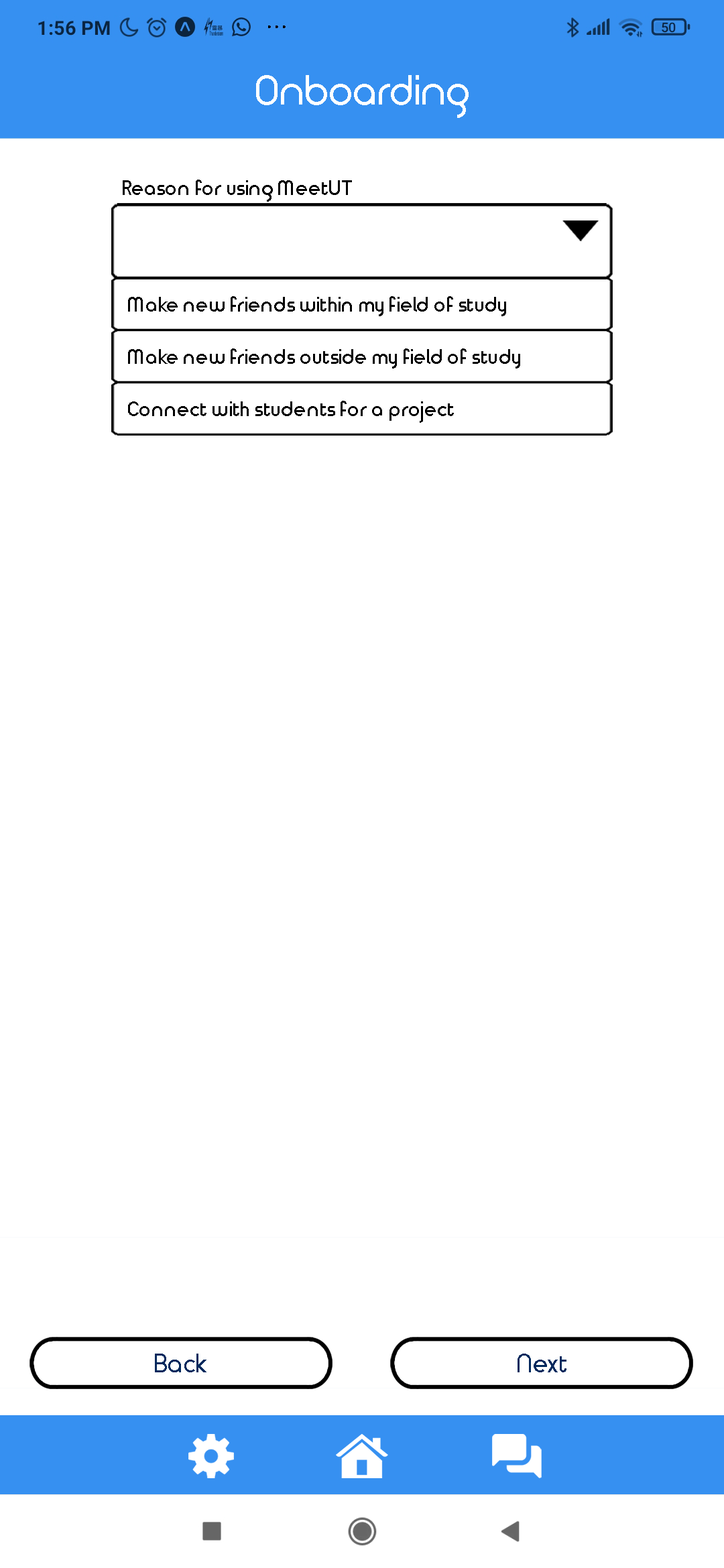
<style>
.page{position:relative;width:724px;height:1568px;background:#ffffff}
.page>*{position:absolute;margin:0}
.t1{font:20.1px "TimeBurner-Bold";color:#000000}
</style>
<div class="page">
<p class="t1" style="left:123px;top:180px;width:229px;height:22px">Reason for using MeetUT</p>
<p class="t1" style="left:128px;top:296px;width:378px;height:20px">Make new friends within my field of study</p>
<p class="t1" style="left:128px;top:348px;width:392px;height:21px">Make new friends outside my field of study</p>
<p class="t1" style="left:128px;top:401px;width:326px;height:22px">Connect with students for a project</p>
</div>
